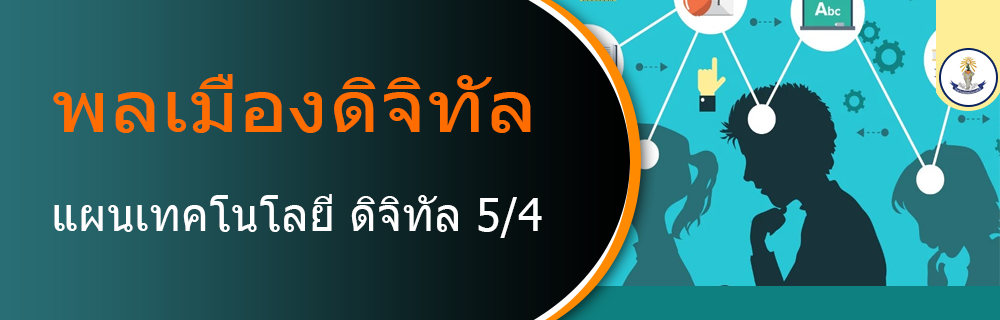
<style>
.page{position:relative;width:1000px;height:320px}
.page>*{position:absolute;margin:0}
.t1{font:72px "Tahoma";color:#ff6c00;scale:1.15 1}
.t2{font:45.1px "Tahoma";color:#ffffff}
</style>
<div class="page">
<p class="t1" style="left:53px;top:74px;width:478px;height:59px">พลเมืองดิจิทัล</p>
<p class="t2" style="left:54px;top:194px;width:488px;height:44px">แผนเทคโนโลยี ดิจิทัล 5/4</p>
</div>
